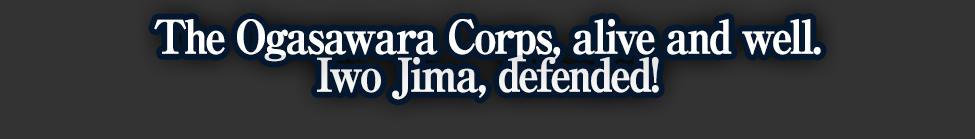
<style>
.page{position:relative;width:975px;height:139px;background:#333333}
.page>*{position:absolute;margin:0}
.t1{font:46px/38px "RyuminPro-ExBold";letter-spacing:-0.08em;color:#ffffff;font-weight:bold;scale:0.9 1}
</style>
<div class="page">
<p class="t1" style="left:154px;top:19px;width:667px;height:81px;text-align:center">The Ogasawara Corps, alive and well.<br>Iwo Jima, defended!</p>
</div>
